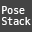
<style>
.page{position:relative;width:32px;height:32px;background:#444444}
.page>*{position:absolute;margin:0}
.t1{font:11px/11px "HackGen-Regular";color:#ffffff}
</style>
<div class="page">
<p class="t1" style="left:2px;top:6px;width:29px;height:19px">Pose<br>Stack</p>
</div>
